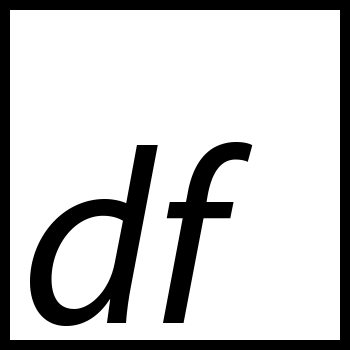
<style>
.page{position:relative;width:350px;height:350px;background:#ffffff}
.page>*{position:absolute;margin:0}
.t1{font:250px "MyriadPro-It";color:#000000}
</style>
<div class="page">
<p class="t1" style="left:30px;top:145px;width:128px;height:181px">d</p>
<p class="t1" style="left:163px;top:142px;width:90px;height:181px">f</p>
</div>
